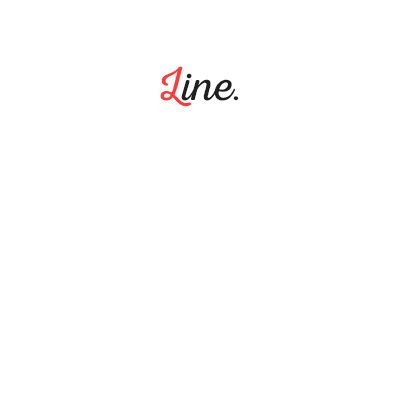
<style>
.page{position:relative;width:400px;height:400px;background:#ffffff}
.page>*{position:absolute;margin:0}
.t1{font:48px "NexaRustScriptL-0";color:#1f1f1f}
.t2{font:48px "NexaRustScriptL-0";color:#ff3c3c}
</style>
<div class="page">
<p class="t1" style="left:160px;top:66px;width:79px;height:41px"><span class="t2">L</span>ine.</p>
</div>
